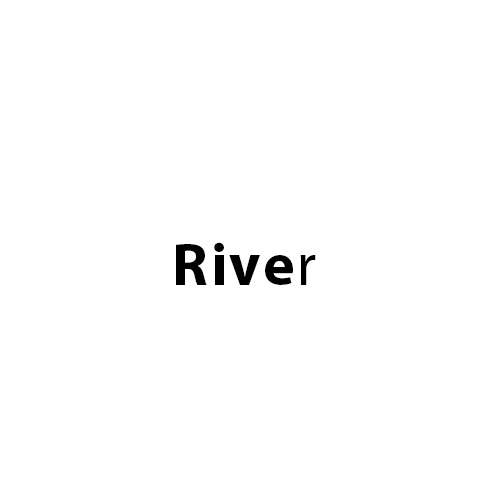
<style>
.page{position:relative;width:500px;height:500px;background:#ffffff}
.page>*{position:absolute;margin:0}
.t1{font:60px "MyriadHebrew-Bold";letter-spacing:0.04em;color:#000000}
.t2{font:60px "MyriadHebrew-Regular";letter-spacing:0.04em;color:#000000}
</style>
<div class="page">
<p class="t1" style="left:176px;top:242px;width:140px;height:43px">Rive<span class="t2">r</span></p>
</div>
